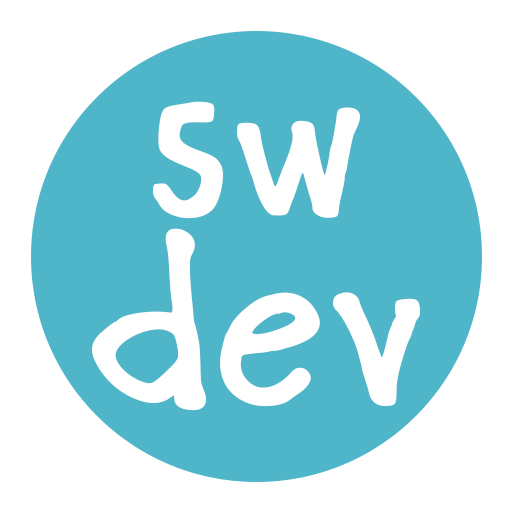
<style>
.page{position:relative;width:512px;height:512px;background:#ffffff}
.page>*{position:absolute;margin:0}
.t1{font:235px/188px "Griun_Simsimche-Rg";color:#ffffff}
</style>
<div class="page">
<p class="t1" style="left:92px;top:101px;width:329px;height:310px;text-align:center">sw<br>dev</p>
</div>
